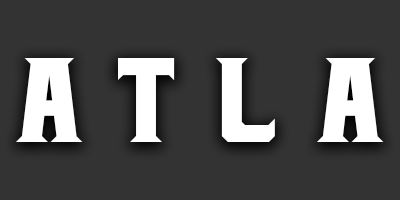
<style>
.page{position:relative;width:400px;height:200px;background:#333333}
.page>*{position:absolute;margin:0}
.t1{font:120px "COMPANYRegular";letter-spacing:0.3em;color:#ffffff}
</style>
<div class="page">
<p class="t1" style="left:16px;top:58px;width:368px;height:84px">ATLA</p>
</div>
